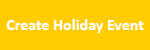
<style>
.page{position:relative;width:150px;height:50px;background:#ffcc00}
.page>*{position:absolute;margin:0}
.t1{font:16px "Calibri-Bold";color:#ffffff}
</style>
<div class="page">
<p class="t1" style="left:6px;top:19px;width:138px;height:14px">Create Holiday Event</p>
</div>
